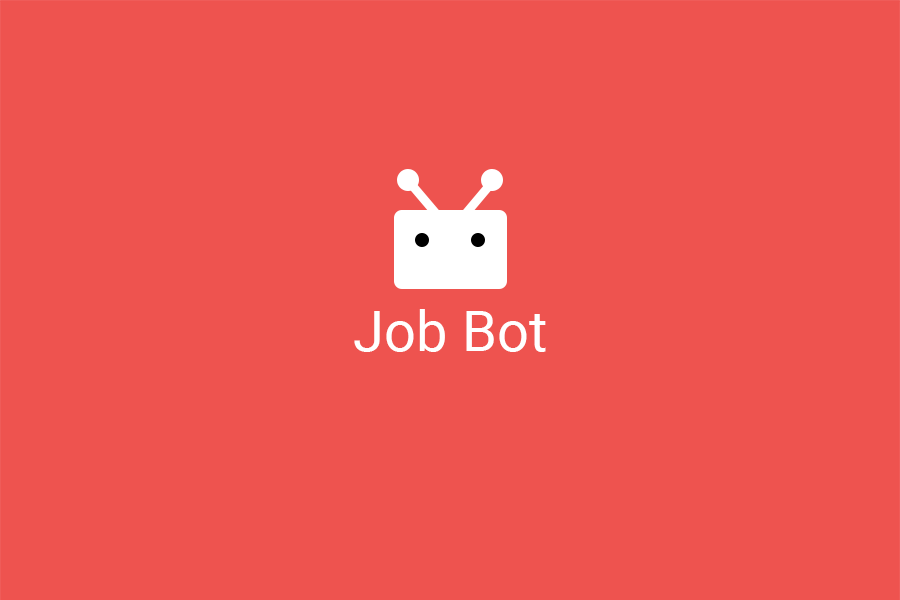
<style>
.page{position:relative;width:900px;height:600px;background:#ee534f}
.page>*{position:absolute;margin:0}
.t1{font:56.2px "Roboto-Regular";color:#ffffff}
</style>
<div class="page">
<p class="t1" style="left:354px;top:309px;width:192px;height:43px">Job Bot</p>
</div>
